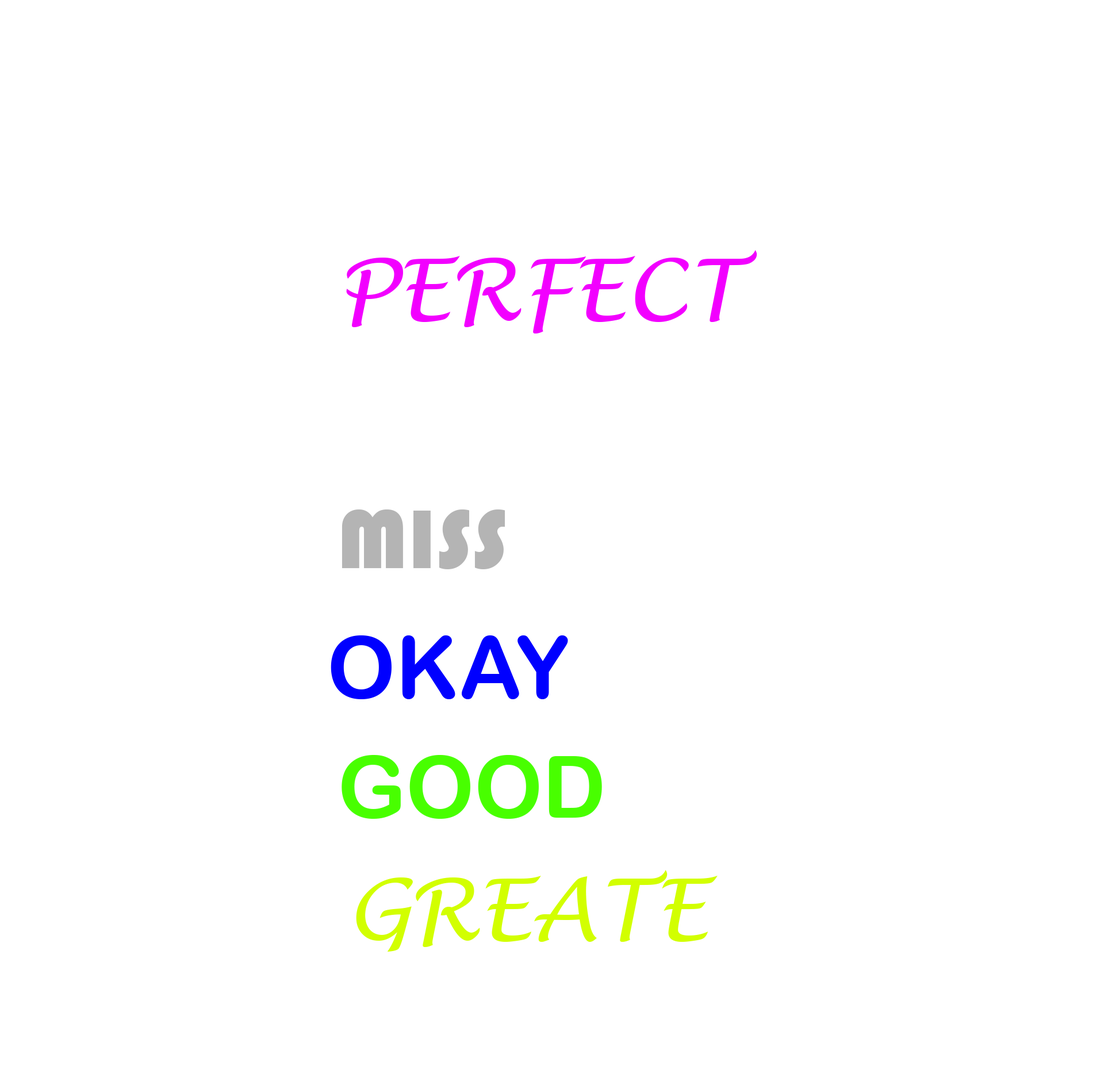
<style>
.page{position:relative;width:1104px;height:1081px;background:#ffffff}
.page>*{position:absolute;margin:0}
.t1{font:86.2px "LucidaHandwriting-Italic";color:#f200ff}
.t2{font:86.2px "Bauhaus93";color:#b4b4b4}
.t3{font:86.2px "ArialRoundedMTBold";color:#0000ff}
.t4{font:86.2px "ArialRoundedMTBold";color:#48ff00}
.t5{font:86.2px "LucidaHandwriting-Italic";color:#d2ff00}
</style>
<div class="page">
<p class="t1" style="left:346px;top:250px;width:411px;height:83px">PERFECT</p>
<p class="t2" style="left:341px;top:509px;width:164px;height:60px">MISS</p>
<p class="t3" style="left:330px;top:635px;width:238px;height:64px">OKAY</p>
<p class="t4" style="left:341px;top:755px;width:261px;height:63px">GOOD</p>
<p class="t5" style="left:356px;top:870px;width:361px;height:81px">GREATE</p>
</div>
